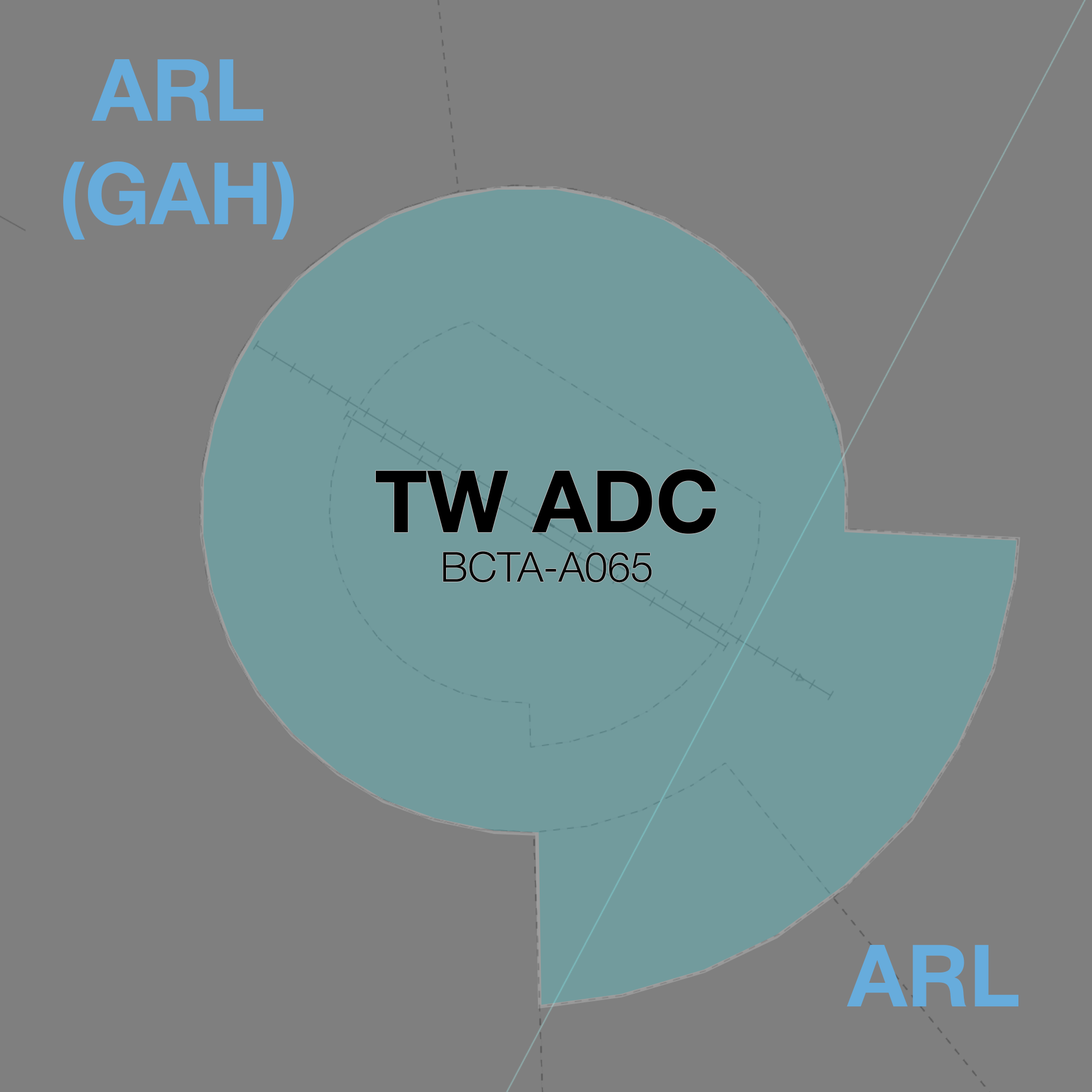
<style>
.page{position:relative;width:1092px;height:1092px;background:#7f7f7f}
.page>*{position:absolute;margin:0}
.t1{font:86.2px "HelveticaNeue-Bold";color:#67acdc}
.t2{font:41.4px "HelveticaNeue-Light";color:#000000}
.t3{font:86.2px "HelveticaNeue-Bold";color:#000000}
</style>
<div class="page">
<p class="t1" style="left:63px;top:59px;width:231px;height:181px;text-align:center">ARL<br>(GAH)</p>
<p class="t2" style="left:375px;top:469px;width:341px;height:114px;text-align:center"><span class="t3">TW ADC<br></span>BCTA-A065</p>
<p class="t1" style="left:847px;top:945px;width:171px;height:62px">ARL</p>
</div>
